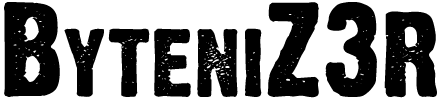
<style>
.page{position:relative;width:440px;height:101px;background:#ffffff}
.page>*{position:absolute;margin:0}
.t1{font:94.7px "DirtyHeadline";color:#000000}
.t2{font:118.8px "DirtyHeadline";color:#000000}
</style>
<div class="page">
<p class="t1" style="left:4px;top:2px;width:433px;height:96px"><span class="t2">B</span>yteni<span class="t2">Z3r</span></p>
</div>
